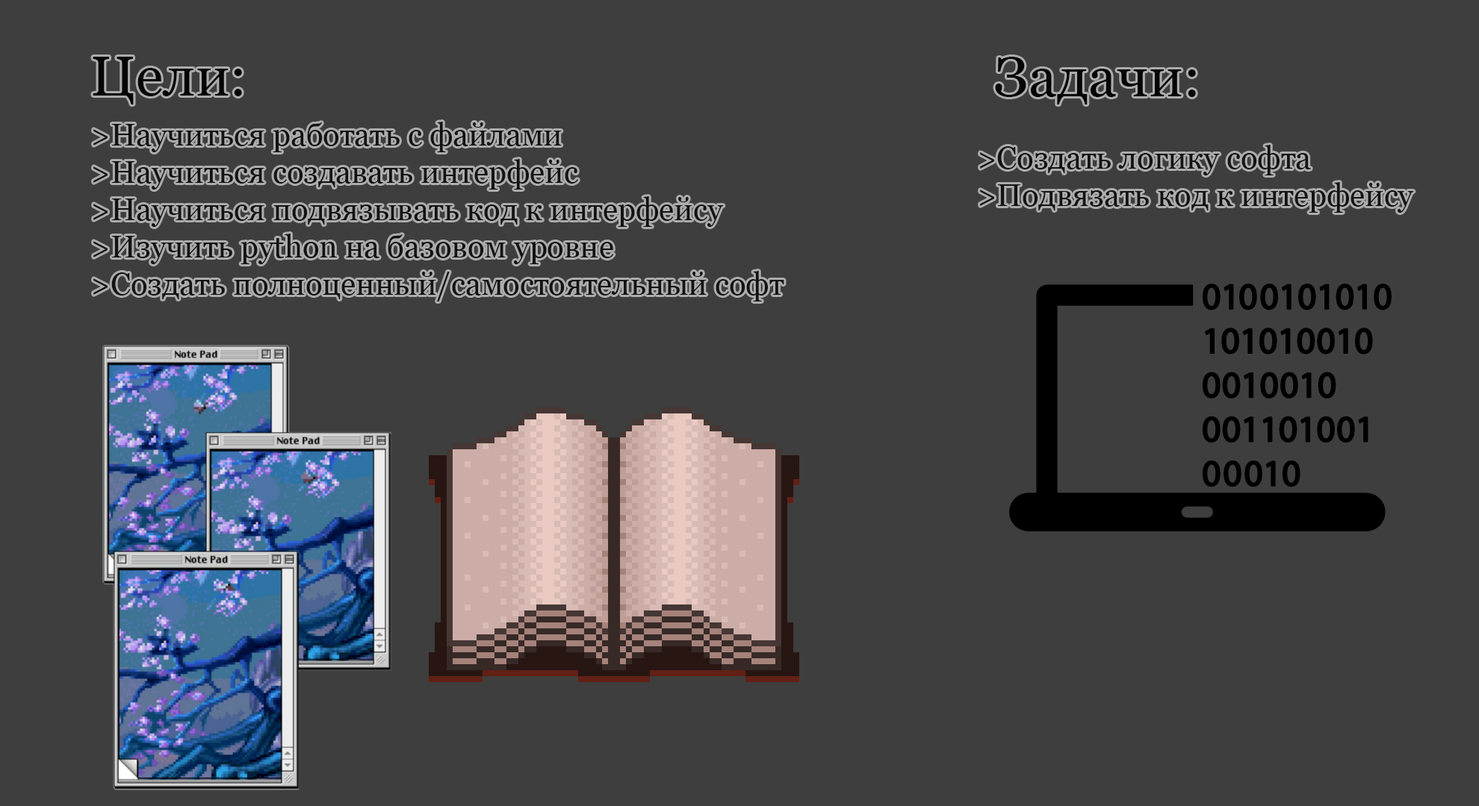
<style>
.page{position:relative;width:1479px;height:806px;background:#3e3e3e}
.page>*{position:absolute;margin:0}
.t1{font:56px "Georgia";color:#050505}
.t2{font:31.1px "Georgia";color:#131313}
</style>
<div class="page">
<p class="t1" style="left:93px;top:57px;width:149px;height:48px">Цели:</p>
<p class="t1" style="left:995px;top:57px;width:201px;height:48px">Задачи:</p>
<p class="t2" style="left:93px;top:122px;width:691px;height:180px">&gt;Научиться работать с файлами<br>&gt;Научиться создавать интерфейс<br>&gt;Научиться подвязывать код к интерфейсу<br>&gt;Изучить python на базовом уровне<br>&gt;Создать полноценный/самостоятельный софт</p>
<p class="t2" style="left:980px;top:145px;width:434px;height:68px">&gt;Создать логику софта<br>&gt;Подвязать код к интерфейсу</p>
</div>
